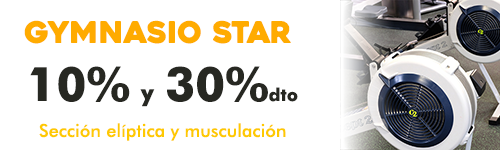
<style>
.page{position:relative;width:500px;height:150px;background:#ffffff}
.page>*{position:absolute;margin:0}
.t1{font:29.7px "Heavitas";color:#ffab00}
.t2{font:47.5px "FuturaBT-Bold";color:#272822}
.t3{font:23.8px "FuturaBT-Bold";color:#272822}
.t4{font:17.8px "FuturaBT-Bold";color:#272822}
.t5{font:17.8px "FuturaBT-Medium";color:#fec901}
</style>
<div class="page">
<p class="t1" style="left:24px;top:20px;width:267px;height:24px">GYMNASIO STAR</p>
<p class="t2" style="left:30px;top:66px;width:268px;height:41px">10% <span class="t3">y </span>30%<span class="t4">dto</span></p>
<p class="t5" style="left:39px;top:123px;width:247px;height:18px">Sección elíptica y musculación</p>
</div>
